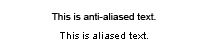
<style>
.page{position:relative;width:200px;height:50px;background:#ffffff}
.page>*{position:absolute;margin:0}
.t1{font:10px "ArialMT";color:#000000}
</style>
<div class="page">
<p class="t1" style="left:51px;top:13px;width:105px;height:7px">This is anti-aliased text.</p>
<p class="t1" style="left:60px;top:32px;width:88px;height:7px">This is aliased text.</p>
</div>
